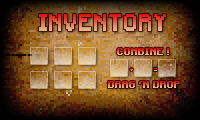
<style>
.page{position:relative;width:200px;height:120px}
.page>*{position:absolute;margin:0}
.t1{font:18px "Minecraftia-Regular";font-weight:bold}
.t2{font:8px "Minecraftia-Regular";font-weight:bold}
</style>
<div class="page">
<p class="t1" style="left:39px;top:14px;width:127px;height:17px">INVENTORY</p>
<p class="t2" style="left:117px;top:48px;width:52px;height:7px">COMBINE !</p>
<p class="t2" style="left:108px;top:81px;width:72px;height:7px">DRAG ‘N DROP</p>
</div>
